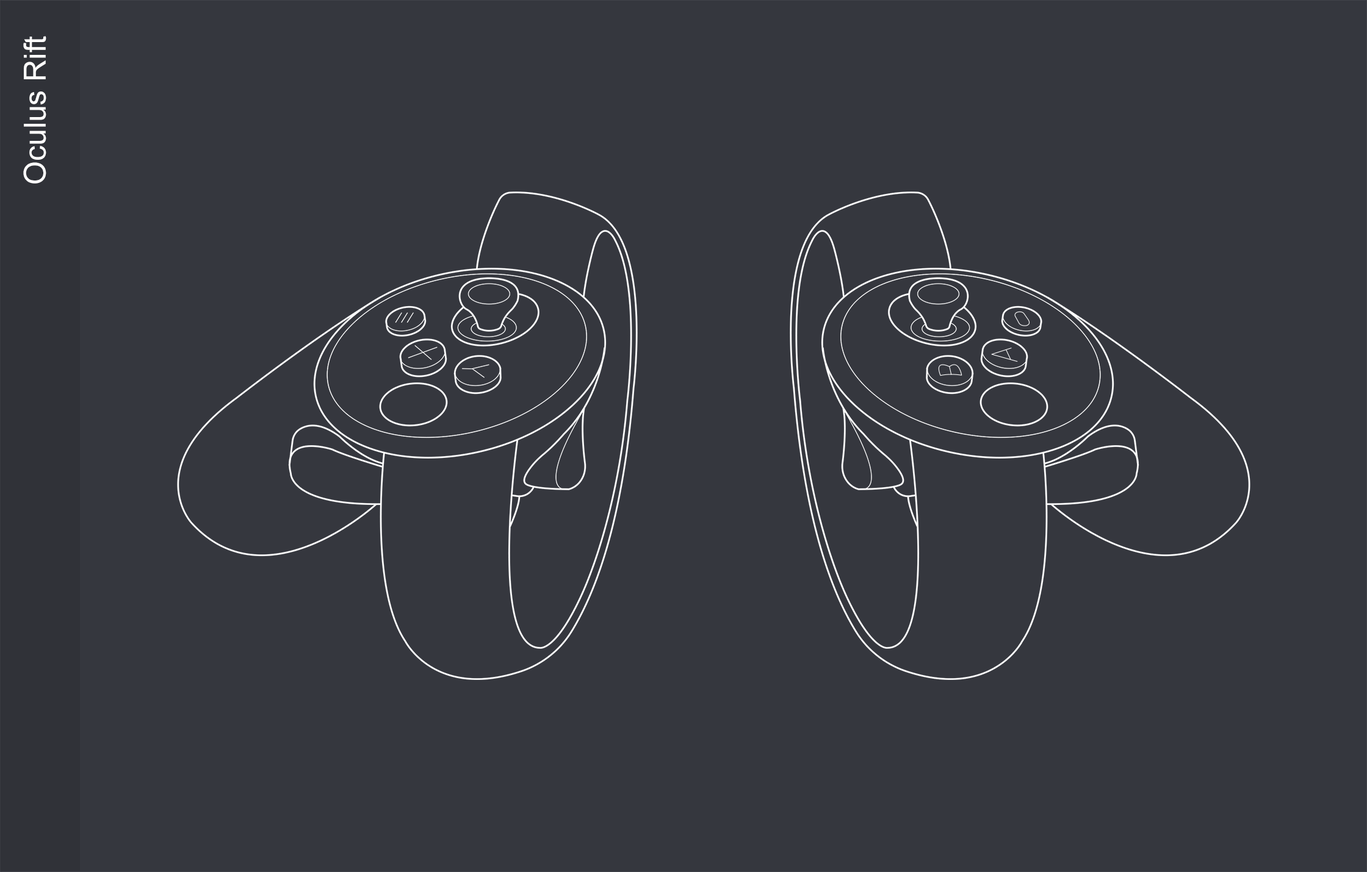
<style>
.page{position:relative;width:1367px;height:872px;background:#35373e}
.page>*{position:absolute;margin:0}
.t1{font:30.5px "ArialMT";color:#ffffff}
</style>
<div class="page">
<p class="t1" style="left:23px;top:36px;width:23px;height:148px;rotate:-90deg">Oculus Rift</p>
</div>
